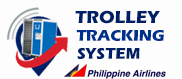
<style>
.page{position:relative;width:182px;height:79px;background:#fdfdfd}
.page>*{position:absolute;margin:0}
.t1{font:18px "ErasITC-Bold";color:#002065}
.t2{font:16px "ErasITC-Bold";color:#00318d}
.t3{font:16px "ErasITC-Bold";color:#002065}
</style>
<div class="page">
<p class="t1" style="left:75px;top:10px;width:85px;height:14px">TROLLEY</p>
<p class="t2" style="left:76px;top:30px;width:88px;height:11px">TRACKING</p>
<p class="t3" style="left:77px;top:48px;width:63px;height:11px">SYSTEM</p>
</div>
